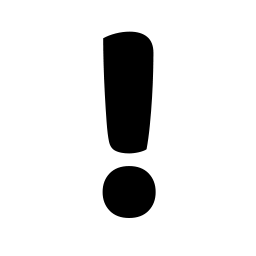
<style>
.page{position:relative;width:256px;height:256px;background:#ffffff}
.page>*{position:absolute;margin:0}
.t1{font:275.5px "BalooBhaina-Regular";color:#000000}
</style>
<div class="page">
<p class="t1" style="left:102px;top:31px;width:54px;height:187px">!</p>
</div>
